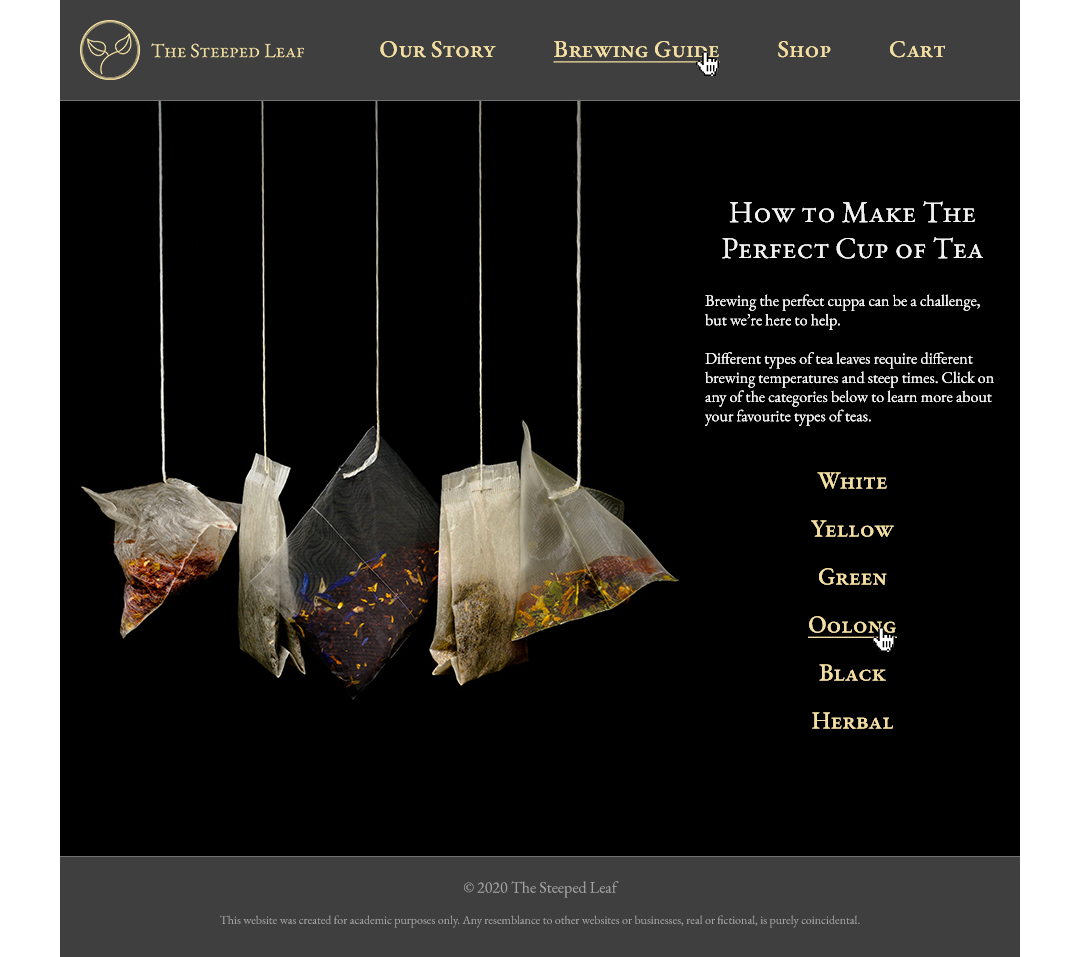
<style>
.page{position:relative;width:1080px;height:957px;background:#000000}
.page>*{position:absolute;margin:0}
.t1{font:24px "EBGaramond-Medium";color:#f2dea0;font-variant:small-caps}
.t2{font:24px "EBGaramond-Medium";color:#f2dea0;font-variant:small-caps;text-decoration:underline}
.t3{font:16px "EBGaramond-Regular";color:#f2f2f2}
.t4{font:30px "EBGaramond-Regular";color:#f2f2f2;font-variant:small-caps}
.t5{font:24px/48px "EBGaramond-Medium";color:#f2dea0;font-variant:small-caps}
.t6{font:24px/48px "EBGaramond-Medium";color:#f2dea0;font-variant:small-caps;text-decoration:underline}
.t7{font:12px "EBGaramond-Regular";color:#a4a5a6}
.t8{font:16px "EBGaramond-Regular";color:#a4a5a6}
</style>
<div class="page">
<p class="t1" style="left:380px;top:41px;width:565px;height:17px">Our Story    Brewing Guide    Shop    Cart</p>
<p class="t2" style="left:380px;top:41px;width:565px;height:22px"><span class="t1">Our Story    </span>Brewing Guide    <span class="t1">Shop    Cart</span></p>
<p class="t3" style="left:705px;top:201px;width:289px;height:528px;text-align:center"><span class="t4">How to Make The Perfect Cup of Tea<br><br><br></span>Brewing the perfect cuppa can be a challenge, but we’re here to help. <br><br>Different types of tea leaves require different brewing temperatures and steep times. Click on any of the categories below to learn more about your favourite types of teas.<br><br><span class="t5">White<br>Yellow<br>Green<br>Oolong<br>Black<br>Herbal</span></p>
<p class="t3" style="left:705px;top:201px;width:289px;height:528px;text-align:center"><span class="t4">How to Make The Perfect Cup of Tea<br><br><br></span>Brewing the perfect cuppa can be a challenge, but we’re here to help. <br><br>Different types of tea leaves require different brewing temperatures and steep times. Click on any of the categories below to learn more about your favourite types of teas.<br><br><span class="t5">White<br>Yellow<br>Green<br></span><span class="t6">Oolong<br></span><span class="t5">Black<br>Herbal</span></p>
<p class="t7" style="left:220px;top:881px;width:640px;height:47px;text-align:center"><span class="t8">© 2020 The Steeped Leaf<br><br></span>This website was created for academic purposes only. Any resemblance to other websites or businesses, real or fictional, is purely coincidental.</p>
</div>
